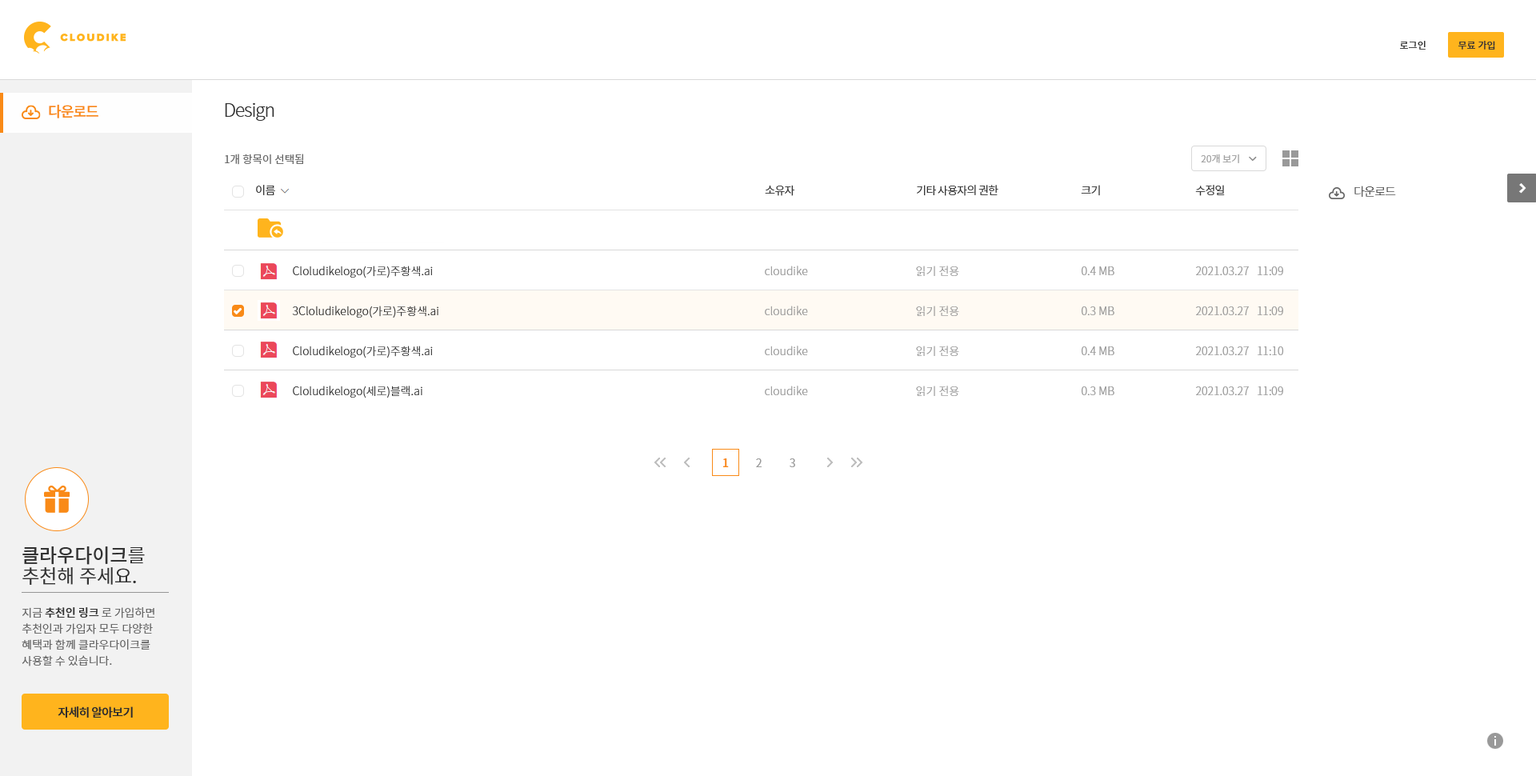
<style>
.page{position:relative;width:1536px;height:776px;background:#ffffff}
.page>*{position:absolute;margin:0}
.t1{font:9.6px "NotoSansCJKkr-Medium";color:#333333}
.t2{font:14.4px "NotoSansCJKkr-Medium";letter-spacing:-0.05em;color:#f98a17}
.t3{font:18.4px "NotoSansCJKkr-Light";letter-spacing:-0.05em;color:#333333}
.t4{font:10.8px "NotoSansCJKkr-DemiLight";color:#666666}
.t5{font:9.6px "NotoSansCJKkr-DemiLight";color:#a1a1a1}
.t6{font:11.2px "NotoSansCJKkr-DemiLight";letter-spacing:-0.05em;color:#333333}
.t7{font:12px "NotoSansCJKkr-Light";letter-spacing:-0.05em;color:#333333}
.t8{font:11.2px/40px "NotoSansCJKkr-Light";color:#333333}
.t9{font:11.2px/40px "NotoSansCJKkr-Light";color:#999999}
.t10{font:11.2px "NotoSansCJKkr-Medium";color:#f98a17}
.t11{font:11.2px "NotoSansCJKkr-DemiLight";color:#999999}
.t12{font:19.2px/20.8px "NotoSansCJKkr-DemiLight";color:#333333}
.t13{font:19.2px/20.8px "NotoSansCJKkr-Medium";color:#333333}
.t14{font:11.2px/16px "NotoSansCJKkr-DemiLight";color:#666666}
.t15{font:11.2px/16px "NotoSansCJKkr-Medium";color:#333333}
.t16{font:12px "NotoSansCJKkr-Medium";letter-spacing:-0.05em;color:#2d2d2d}
</style>
<div class="page">
<p class="t1" style="left:1400px;top:41px;width:26px;height:9px">로그인</p>
<p class="t1" style="left:1459px;top:41px;width:37px;height:9px">무료 가입</p>
<p class="t2" style="left:49px;top:104px;width:49px;height:14px">다운로드</p>
<p class="t3" style="left:225px;top:102px;width:49px;height:19px">Design</p>
<p class="t4" style="left:225px;top:154px;width:78px;height:11px">1개 항목이 선택됨</p>
<p class="t5" style="left:1201px;top:154px;width:38px;height:9px">20개 보기</p>
<p class="t6" style="left:256px;top:185px;width:19px;height:10px">이름</p>
<p class="t6" style="left:765px;top:185px;width:30px;height:11px">소유자</p>
<p class="t6" style="left:917px;top:185px;width:82px;height:11px">기타 사용자의 권한</p>
<p class="t6" style="left:1081px;top:185px;width:19px;height:11px">크기</p>
<p class="t6" style="left:1195px;top:185px;width:30px;height:11px">수정일</p>
<p class="t7" style="left:1355px;top:186px;width:41px;height:11px">다운로드</p>
<p class="t8" style="left:292px;top:266px;width:146px;height:132px">Cloludikelogo(가로)주황색.ai<br>3Cloludikelogo(가로)주황색.ai<br>Cloludikelogo(가로)주황색.ai<br>Cloludikelogo(세로)블랙.ai</p>
<p class="t9" style="left:765px;top:266px;width:43px;height:129px">cloudike<br>cloudike<br>cloudike<br>cloudike</p>
<p class="t9" style="left:916px;top:266px;width:43px;height:130px">읽기 전용<br>읽기 전용<br>읽기 전용<br>읽기 전용</p>
<p class="t9" style="left:1082px;top:266px;width:33px;height:129px">0.4 MB<br>0.3 MB<br>0.4 MB<br>0.3 MB</p>
<p class="t9" style="left:1196px;top:266px;width:88px;height:129px">2021.03.27   11:09<br>2021.03.27   11:09<br>2021.03.27   11:10<br>2021.03.27   11:09</p>
<p class="t10" style="left:723px;top:458px;width:6px;height:9px">1</p>
<p class="t11" style="left:756px;top:458px;width:6px;height:9px">2</p>
<p class="t11" style="left:790px;top:458px;width:5px;height:9px">3</p>
<p class="t12" style="left:22px;top:547px;width:123px;height:38px"><span class="t13">클라우다이크</span>를 <br>추천해 주세요.</p>
<p class="t14" style="left:22px;top:607px;width:132px;height:60px">지금 <span class="t15">추천인 링크</span> 로 가입하면<br>추천인과 가입자 모두 다양한 <br>혜택과 함께 클라우다이크를 <br>사용할 수 있습니다.</p>
<p class="t16" style="left:58px;top:707px;width:75px;height:12px">자세히 알아보기</p>
</div>
